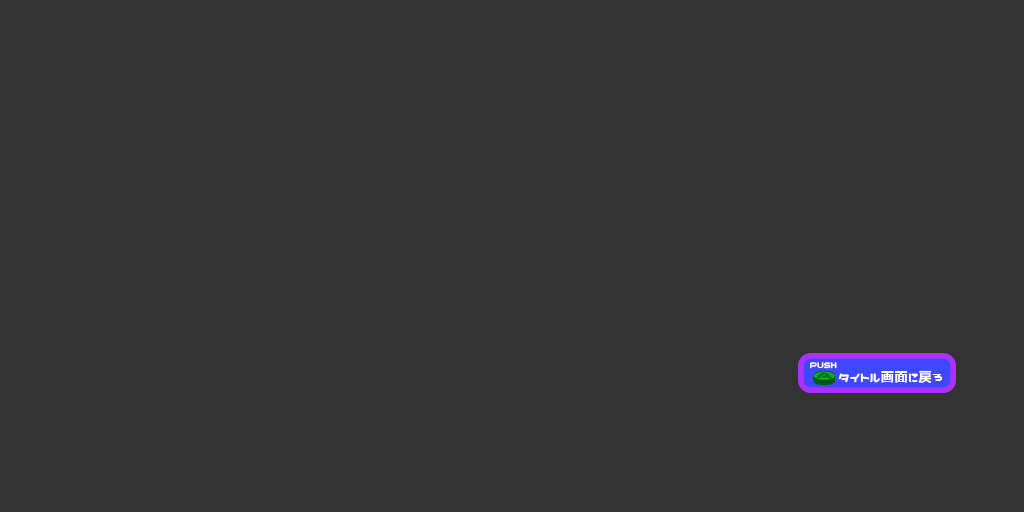
<style>
.page{position:relative;width:1024px;height:512px;background:#333333}
.page>*{position:absolute;margin:0}
.t1{font:9.3px "Nicoca";color:#ffffff;scale:0.97 1}
.t2{font:14.1px "Nicoca";color:#ffffff}
</style>
<div class="page">
<p class="t1" style="left:810px;top:362px;width:27px;height:7px">PUSH</p>
<p class="t2" style="left:838px;top:370px;width:105px;height:13px">タイトル画面に戻る</p>
</div>
